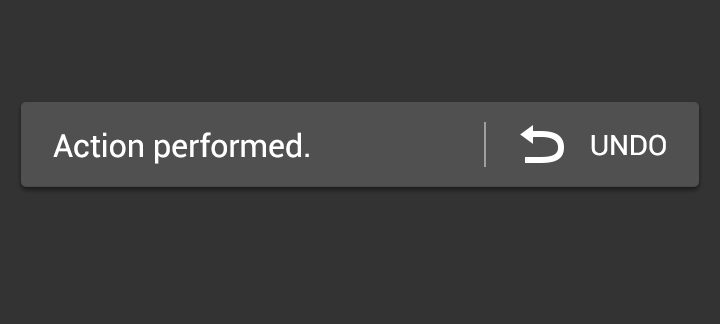
<style>
.page{position:relative;width:720px;height:324px;background:#333333}
.page>*{position:absolute;margin:0}
.t1{font:33px "Roboto-Regular";color:#ffffff}
.t2{font:29px "Roboto-Regular";color:#ffffff}
</style>
<div class="page">
<p class="t1" style="left:53px;top:132px;width:256px;height:32px">Action performed.</p>
<p class="t2" style="left:591px;top:134px;width:75px;height:22px">UNDO</p>
</div>
